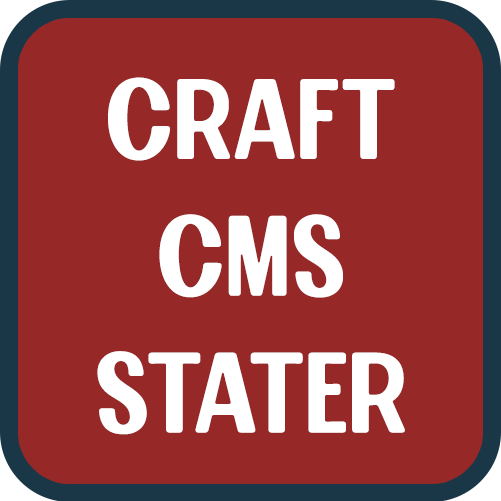
<style>
.page{position:relative;width:501px;height:501px;background:#972828}
.page>*{position:absolute;margin:0}
.t1{font:114px "WilcoLoftSans-Treble";color:#ffffff}
</style>
<div class="page">
<p class="t1" style="left:97px;top:77px;width:308px;height:358px;text-align:center">Craft<br>cms<br>stater</p>
</div>
